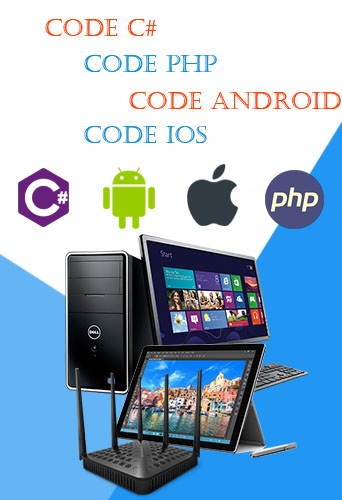
<style>
.page{position:relative;width:342px;height:500px;background:#ffffff}
.page>*{position:absolute;margin:0}
.t1{font:24px "Castellar";color:#ff4400}
.t2{font:24px "Castellar";color:#0094da}
.t3{font:24px "Castellar";color:#0f93dc}
</style>
<div class="page">
<p class="t1" style="left:45px;top:19px;width:112px;height:17px">CODE c#</p>
<p class="t2" style="left:84px;top:55px;width:133px;height:17px">CODE php</p>
<p class="t1" style="left:129px;top:92px;width:212px;height:17px">CODE ANDROID</p>
<p class="t3" style="left:84px;top:126px;width:123px;height:17px">CODE IOS</p>
</div>
